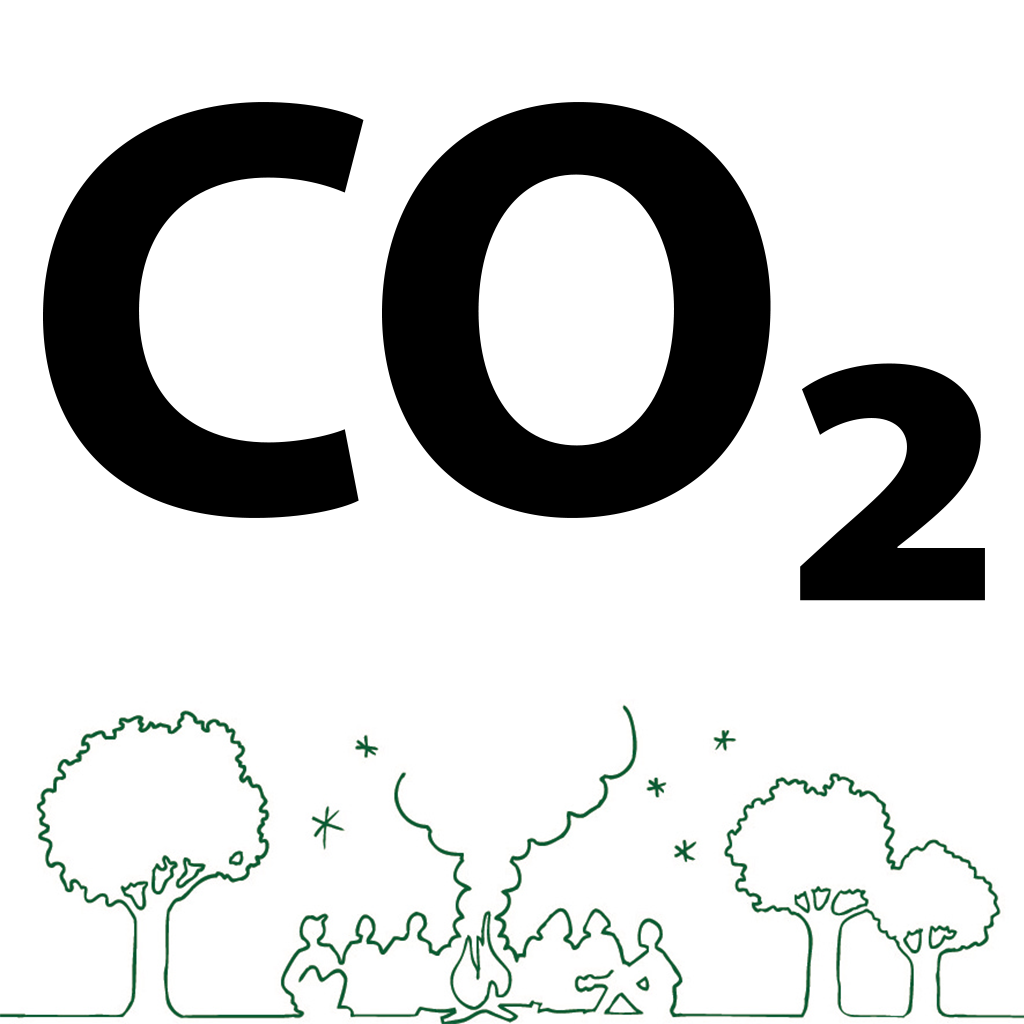
<style>
.page{position:relative;width:1024px;height:1024px;background:#ffffff}
.page>*{position:absolute;margin:0}
.t1{font:600px "MyriadPro-Bold";color:#000000}
</style>
<div class="page">
<p class="t1" style="left:43px;top:102px;width:942px;height:499px">CO2</p>
</div>
